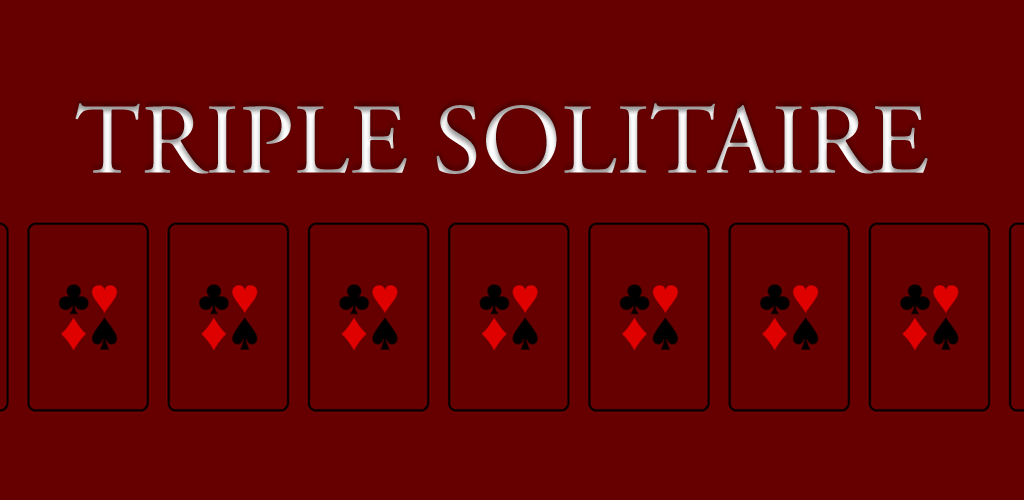
<style>
.page{position:relative;width:1024px;height:500px;background:#660000}
.page>*{position:absolute;margin:0}
.t1{font:100px "AGaramondPro-Regular"}
</style>
<div class="page">
<p class="t1" style="left:75px;top:103px;width:853px;height:71px">TRIPLE SOLITAIRE</p>
</div>
